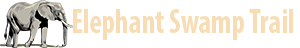
<style>
.page{position:relative;width:300px;height:48px;background:#ffffff}
.page>*{position:absolute;margin:0}
.t1{font:34.7px "MyriadPro-BoldCond";color:#f7dcb4;scale:0.86 1}
</style>
<div class="page">
<p class="t1" style="left:73px;top:9px;width:220px;height:31px">Elephant Swamp Trail</p>
</div>
